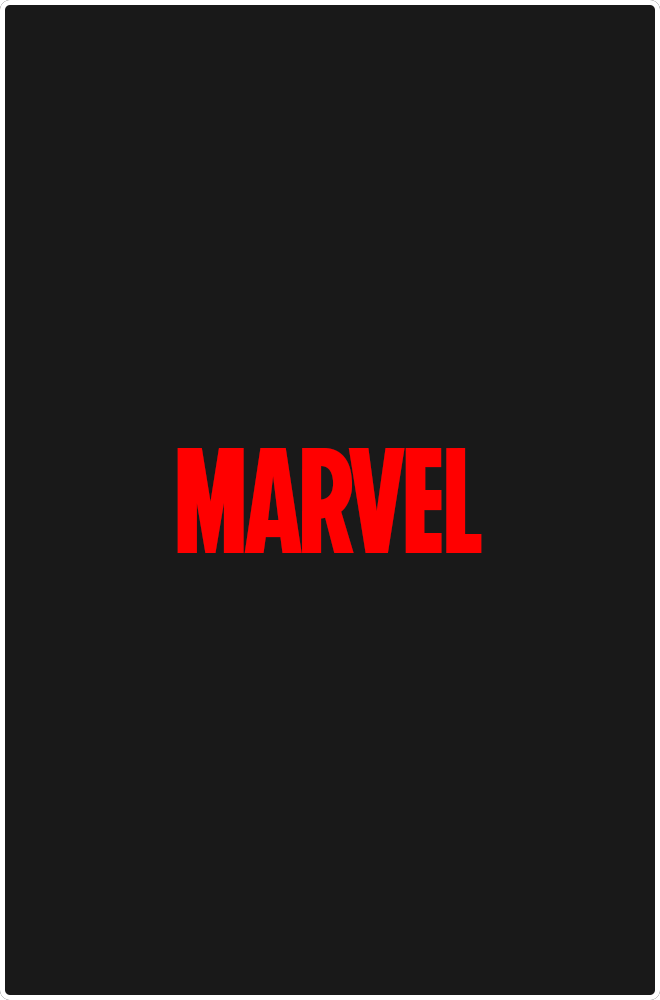
<style>
.page{position:relative;width:660px;height:1000px;background:#191919}
.page>*{position:absolute;margin:0}
.t1{font:150px "Marvel-Regular";color:#ff0000}
</style>
<div class="page">
<p class="t1" style="left:177px;top:448px;width:305px;height:105px">MARVEL</p>
</div>
